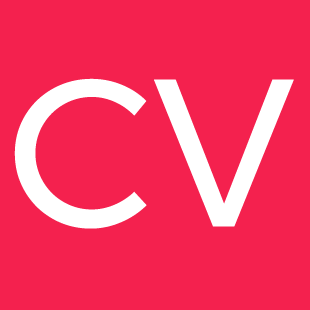
<style>
.page{position:relative;width:310px;height:310px;background:#f4214e}
.page>*{position:absolute;margin:0}
.t1{font:209.7px "Montserrat-Regular";color:#ffffff}
</style>
<div class="page">
<p class="t1" style="left:14px;top:78px;width:280px;height:151px">CV</p>
</div>
